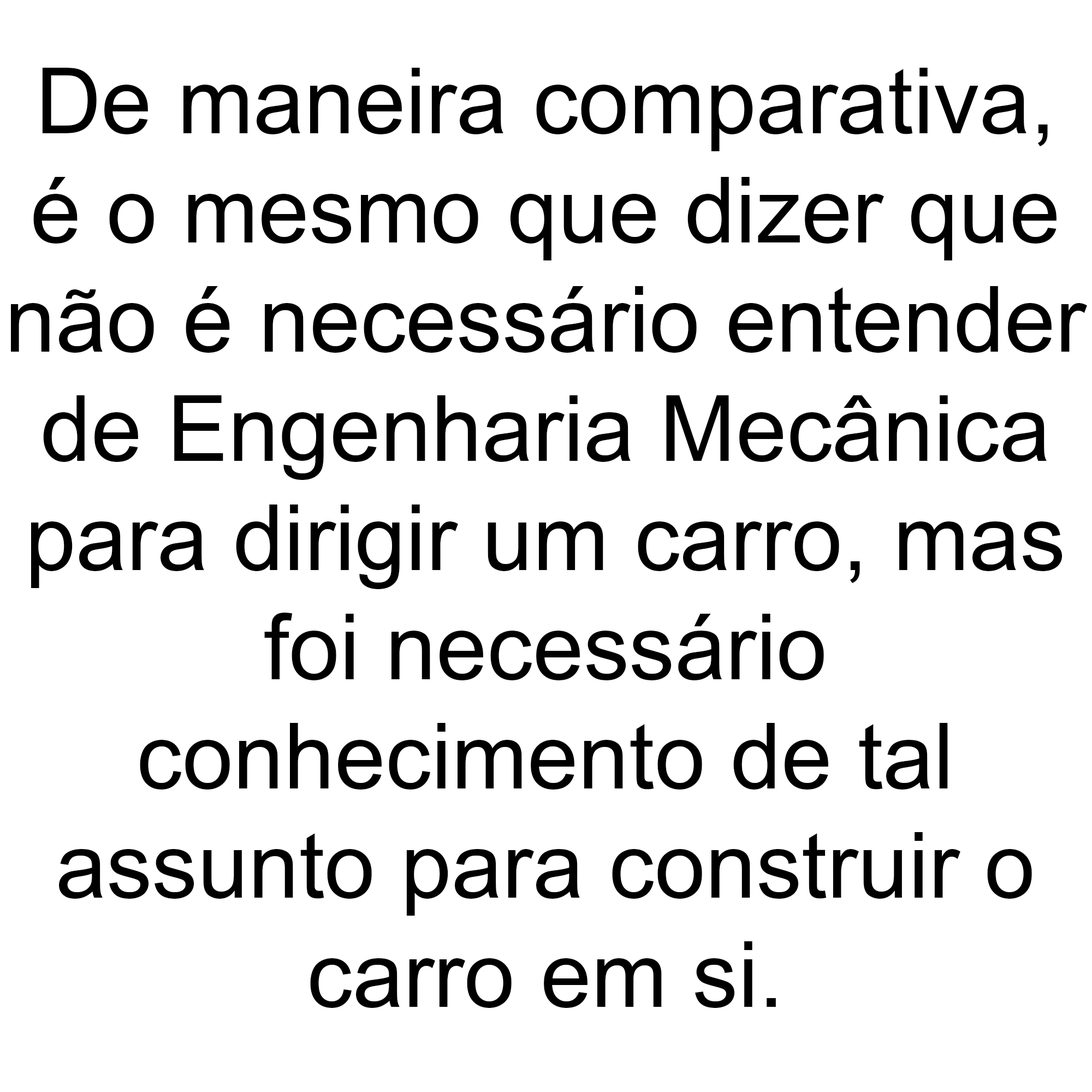
<style>
.page{position:relative;width:1092px;height:1092px;background:#ffffff}
.page>*{position:absolute;margin:0}
.t1{font:91px "ArialMT";color:#000000}
</style>
<div class="page">
<p class="t1" style="left:11px;top:68px;width:1076px;height:940px;text-align:center">De maneira comparativa,<br>é o mesmo que dizer que<br>não é necessário entender<br>de Engenharia Mecânica<br>para dirigir um carro, mas<br>foi necessário<br>conhecimento de tal<br>assunto para construir o<br>carro em si.</p>
</div>
